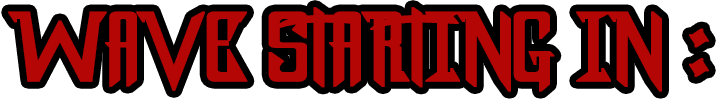
<style>
.page{position:relative;width:720px;height:99px;background:#000000}
.page>*{position:absolute;margin:0}
.t1{font:86.4px "DragonForcE";color:#b50606;font-weight:bold}
</style>
<div class="page">
<p class="t1" style="left:8px;top:7px;width:701px;height:85px">WAVE STARTING IN :</p>
</div>
